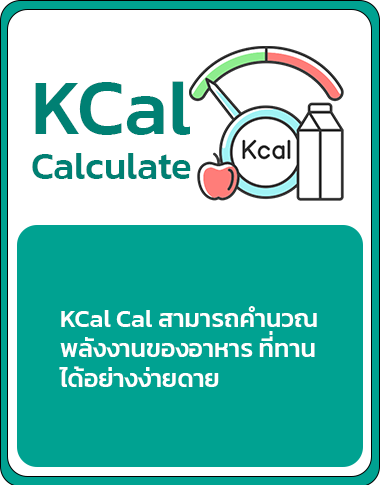
<style>
.page{position:relative;width:380px;height:485px;background:#00a291}
.page>*{position:absolute;margin:0}
.t1{font:37.5px "Kanit-Medium";color:#008073}
.t2{font:79.2px "Kanit-Medium";color:#008073}
.t3{font:25px "Kanit-Medium";color:#ffffff}
</style>
<div class="page">
<p class="t1" style="left:32px;top:81px;width:159px;height:98px"><span class="t2">KCal<br></span>Calculate</p>
<p class="t3" style="left:59px;top:306px;width:258px;height:81px">KCal Cal สามารถคำนวณ<br>พลังงานของอาหาร ที่ทาน   <br>ได้อย่างง่ายดาย</p>
</div>
